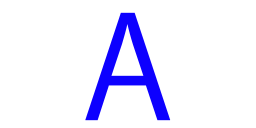
<style>
.page{position:relative;width:256px;height:128px;background:#ffffff}
.page>*{position:absolute;margin:0}
.t1{font:140.9px "KozGoPr6N-Regular";color:#0d00ff;font-weight:bold}
</style>
<div class="page">
<p class="t1" style="left:85px;top:12px;width:86px;height:109px">A</p>
</div>
